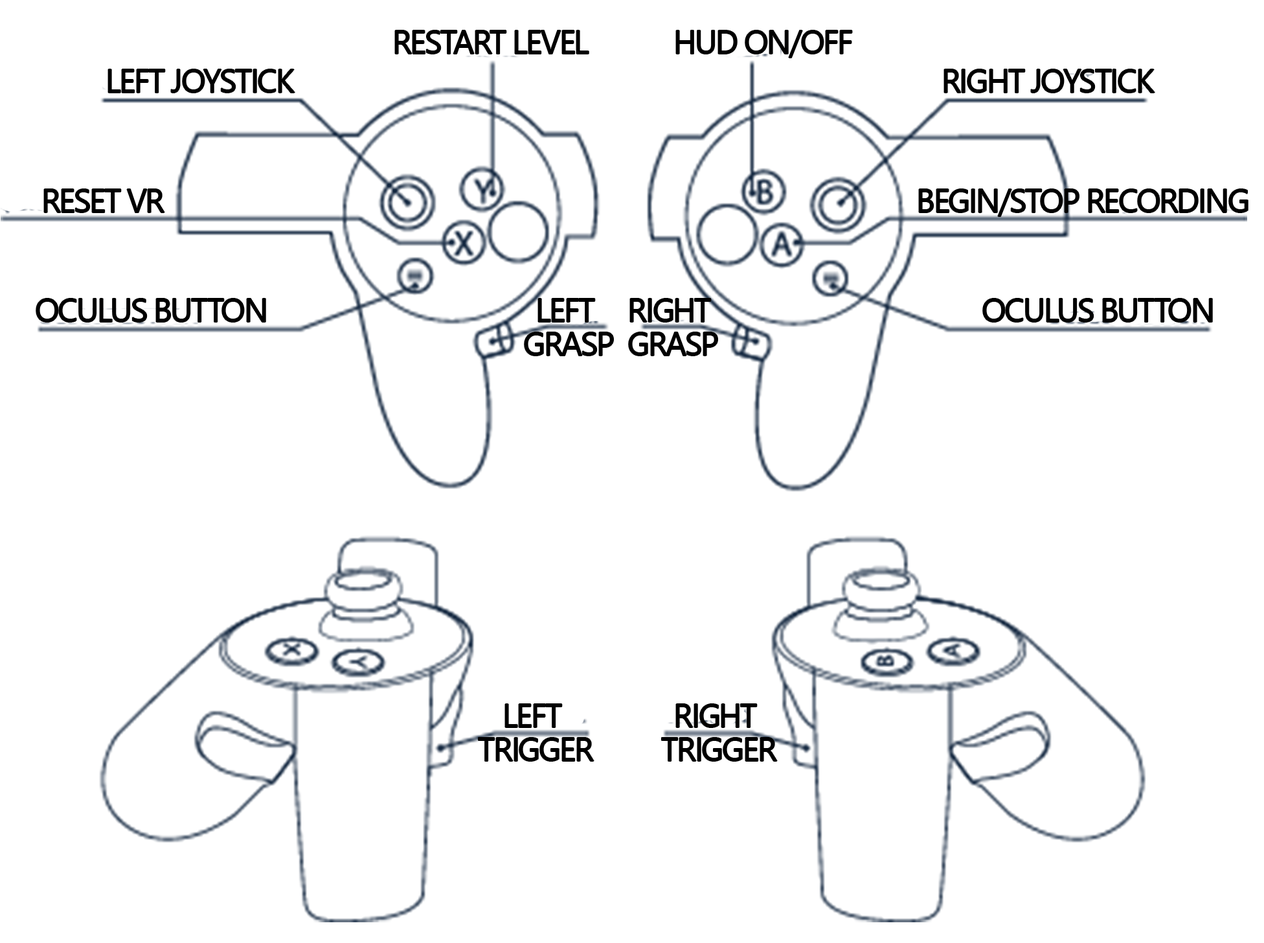
<style>
.page{position:relative;width:1264px;height:943px;background:#ffffff}
.page>*{position:absolute;margin:0}
.t1{font:32.4px "SegoeUISymbol";letter-spacing:-0.05em;color:#000000}
.t2{font:32.4px/33.3px "SegoeUISymbol";letter-spacing:-0.05em;color:#000000}
</style>
<div class="page">
<p class="t1" style="left:395px;top:30px;width:194px;height:24px">RESTART LEVEL</p>
<p class="t1" style="left:676px;top:30px;width:176px;height:28px">HUD ON/OFF</p>
<p class="t1" style="left:944px;top:69px;width:211px;height:24px">RIGHT JOYSTICK</p>
<p class="t1" style="left:44px;top:189px;width:121px;height:23px">RESET VR</p>
<p class="t1" style="left:919px;top:189px;width:329px;height:27px">BEGIN/STOP RECORDING</p>
<p class="t1" style="left:36px;top:299px;width:230px;height:23px">OCULUS BUTTON</p>
<p class="t2" style="left:525px;top:299px;width:88px;height:57px;text-align:center">LEFT <br>GRASP</p>
<p class="t2" style="left:629px;top:299px;width:89px;height:57px;text-align:center">RIGHT <br>GRASP</p>
<p class="t1" style="left:983px;top:299px;width:230px;height:23px">OCULUS BUTTON</p>
<p class="t2" style="left:479px;top:704px;width:115px;height:57px;text-align:center">LEFT <br>TRIGGER</p>
<p class="t2" style="left:662px;top:704px;width:115px;height:57px;text-align:center">RIGHT <br>TRIGGER</p>
</div>
